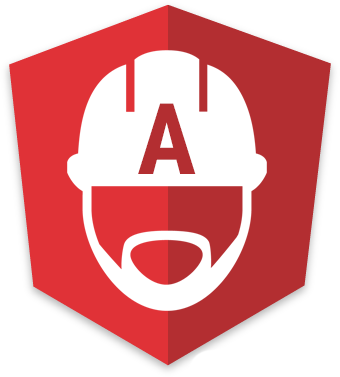
<style>
.page{position:relative;width:340px;height:377px;background:#ffffff}
.page>*{position:absolute;margin:0}
.t1{font:99.3px "RobotoCondensed-Bold";color:#b32e31}
</style>
<div class="page">
<p class="t1" style="left:138px;top:103px;width:58px;height:71px">A</p>
</div>
